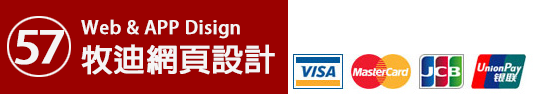
<style>
.page{position:relative;width:550px;height:94px;background:#9b0100}
.page>*{position:absolute;margin:0}
.t1{font:43.8px "AdobeFanHeitiStd-Bold";letter-spacing:-0.1em;color:#f5f5f5;font-weight:bold;scale:1.12 1}
.t2{font:18.1px "AdobeFanHeitiStd-Bold";color:#f5f5f5;font-weight:bold;scale:1.04 1}
.t3{font:31px "AdobeFanHeitiStd-Bold";color:#f5f5f5;font-weight:bold}
</style>
<div class="page">
<p class="t1" style="left:14px;top:30px;width:50px;height:35px">57</p>
<p class="t2" style="left:81px;top:19px;width:159px;height:20px">Web &amp; APP Disign</p>
<p class="t3" style="left:81px;top:44px;width:194px;height:31px">牧迪網頁設計</p>
</div>
